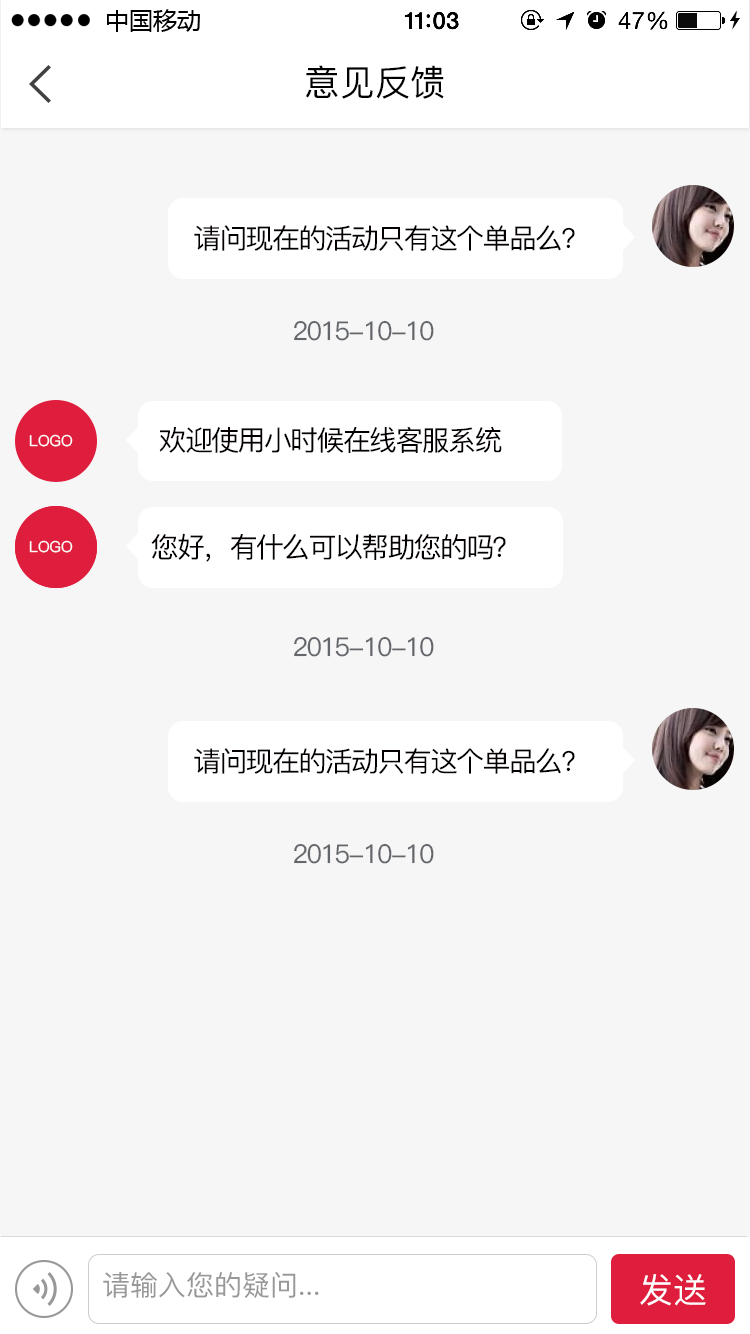
<style>
.page{position:relative;width:750px;height:1334px;background:#f6f6f6}
.page>*{position:absolute;margin:0}
.t1{font:35.7px "PingFang-SC-Medium";color:#000000}
.t2{font:27.7px "PingFang-SC-Medium";letter-spacing:-0.06em;color:#040000}
.t3{font:26px "PingFang-SC-Medium";letter-spacing:-0.06em;color:#63666b}
.t4{font:15.2px "PingFang-SC-Medium";color:#ffffff}
.t5{font:28px "PingFang-SC-Medium";letter-spacing:-0.06em;color:#040000}
.t6{font:28px "PingFang-SC-Medium";color:#999899}
.t7{font:34px "PingFang-SC-Medium";color:#ffffff}
</style>
<div class="page">
<p class="t1" style="left:305px;top:65px;width:139px;height:34px">意见反馈</p>
<p class="t2" style="left:194px;top:225px;width:381px;height:26px">请问现在的活动只有这个单品么？</p>
<p class="t3" style="left:294px;top:320px;width:140px;height:21px">2015-10-10</p>
<p class="t4" style="left:29px;top:434px;width:44px;height:13px">LOGO</p>
<p class="t5" style="left:159px;top:426px;width:343px;height:27px">欢迎使用小时候在线客服系统</p>
<p class="t5" style="left:151px;top:533px;width:355px;height:29px">您好，有什么可以帮助您的吗？</p>
<p class="t4" style="left:29px;top:540px;width:44px;height:13px">LOGO</p>
<p class="t3" style="left:294px;top:636px;width:140px;height:21px">2015-10-10</p>
<p class="t2" style="left:194px;top:748px;width:381px;height:26px">请问现在的活动只有这个单品么？</p>
<p class="t3" style="left:294px;top:843px;width:140px;height:21px">2015-10-10</p>
<p class="t6" style="left:103px;top:1272px;width:216px;height:26px">请输入您的疑问...</p>
<p class="t7" style="left:640px;top:1274px;width:66px;height:32px">发送</p>
</div>
